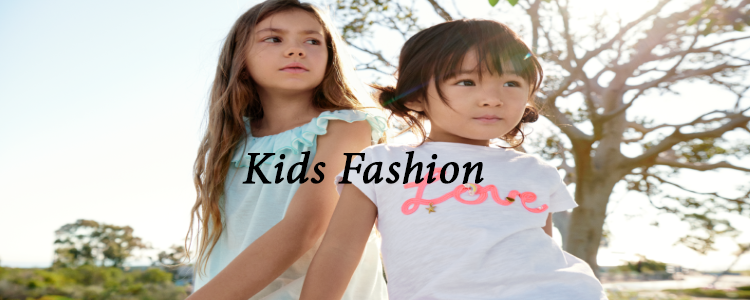
<style>
.page{position:relative;width:750px;height:300px}
.page>*{position:absolute;margin:0}
.t1{font:45.3px "MinionPro-It";color:#000000;font-weight:bold}
</style>
<div class="page">
<p class="t1" style="left:242px;top:151px;width:242px;height:33px">Kids Fashion</p>
</div>
